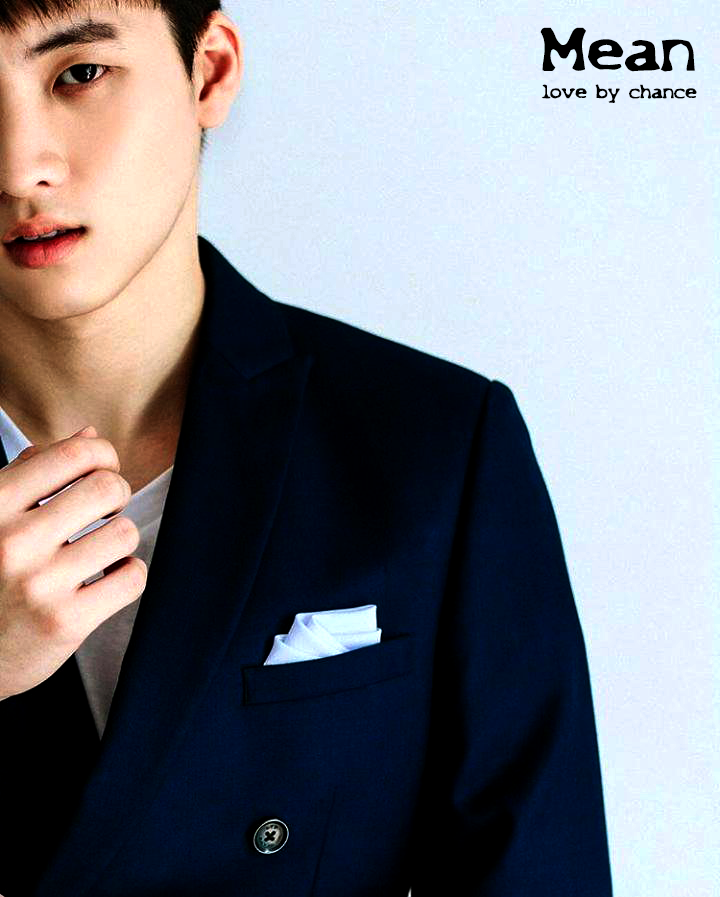
<style>
.page{position:relative;width:720px;height:897px}
.page>*{position:absolute;margin:0}
.t1{font:57px "X-Files-Regular";color:#000000}
.t2{font:18px "X-Files-Regular";color:#000000}
</style>
<div class="page">
<p class="t1" style="left:540px;top:27px;width:155px;height:45px">Mean</p>
<p class="t2" style="left:541px;top:84px;width:156px;height:19px">love by chance</p>
</div>
